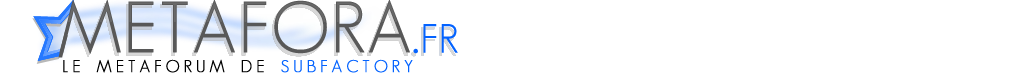
<style>
.page{position:relative;width:1024px;height:79px;background:#ffffff}
.page>*{position:absolute;margin:0}
.t1{font:24px "GeosansLight";letter-spacing:0.22em;color:#000000;font-variant:small-caps;font-weight:bold}
.t2{font:24px "GeosansLight";letter-spacing:0.22em;color:#0463ff;font-variant:small-caps;font-weight:bold}
</style>
<div class="page">
<p class="t1" style="left:63px;top:59px;width:350px;height:14px">le metaforum de <span class="t2">subfactory</span></p>
</div>
